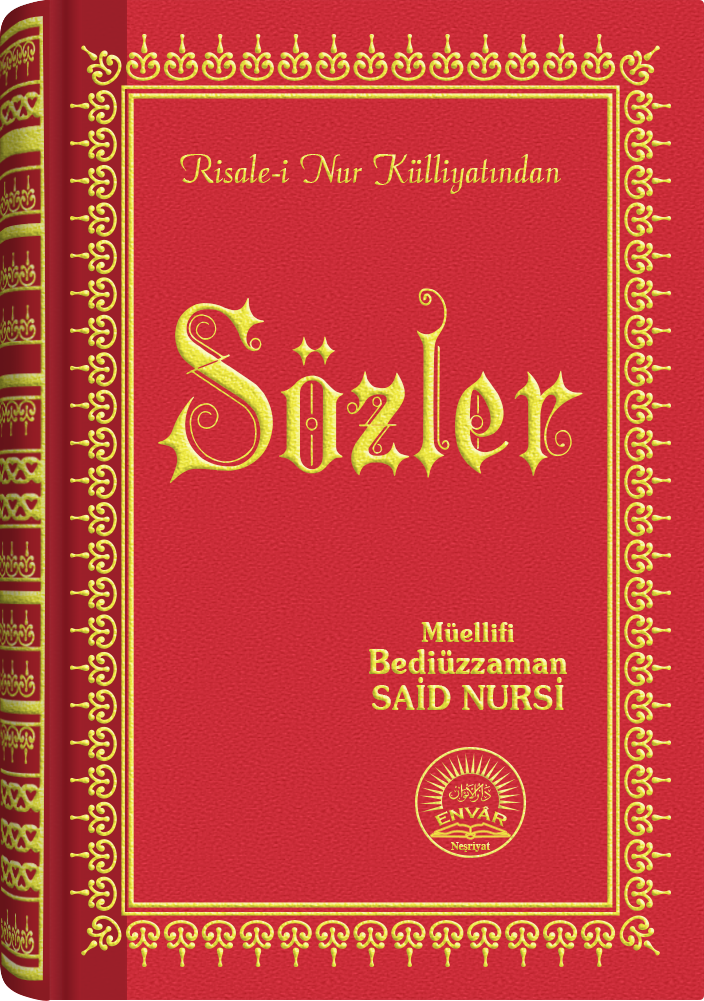
<style>
.page{position:relative;width:704px;height:1001px}
.page>*{position:absolute;margin:0}
.t1{font:45.3px "Barla © 072 Aria ScriptScriptSSi";scale:0.94 1}
.t2{font:232.1px "Barla © 001 Liva Nur";letter-spacing:-0.001em;scale:0.93 1}
.t3{font:33.4px/32.4px "SouvenirITCbyBT-Demi";scale:0.93 1}
.t4{font:27.4px/24.4px "SouvenirITCbyBT-Demi";scale:0.93 1}
.t5{font:33.4px/36.4px "SouvenirITCbyBT-Demi";scale:0.93 1}
.t6{font:15.6px "CopperplateGothic-Bold"}
.t7{font:11.2px "Times-Bold";scale:0.96 1}
</style>
<div class="page">
<p class="t1" style="left:180px;top:154px;width:381px;height:40px">Risale-i Nur Külliyatından</p>
<p class="t2" style="left:158px;top:288px;width:425px;height:195px">Sözler</p>
<p class="t3" style="left:369px;top:622px;width:198px;height:88px;text-align:center"><span class="t4">Müellifi<br></span>Bediüzzaman<br><span class="t5">SAİD NURSİ</span></p>
<p class="t6" style="left:434px;top:806px;width:73px;height:21px">ENVÂR</p>
<p class="t7" style="left:451px;top:842px;width:39px;height:10px">Neşriyat</p>
</div>
